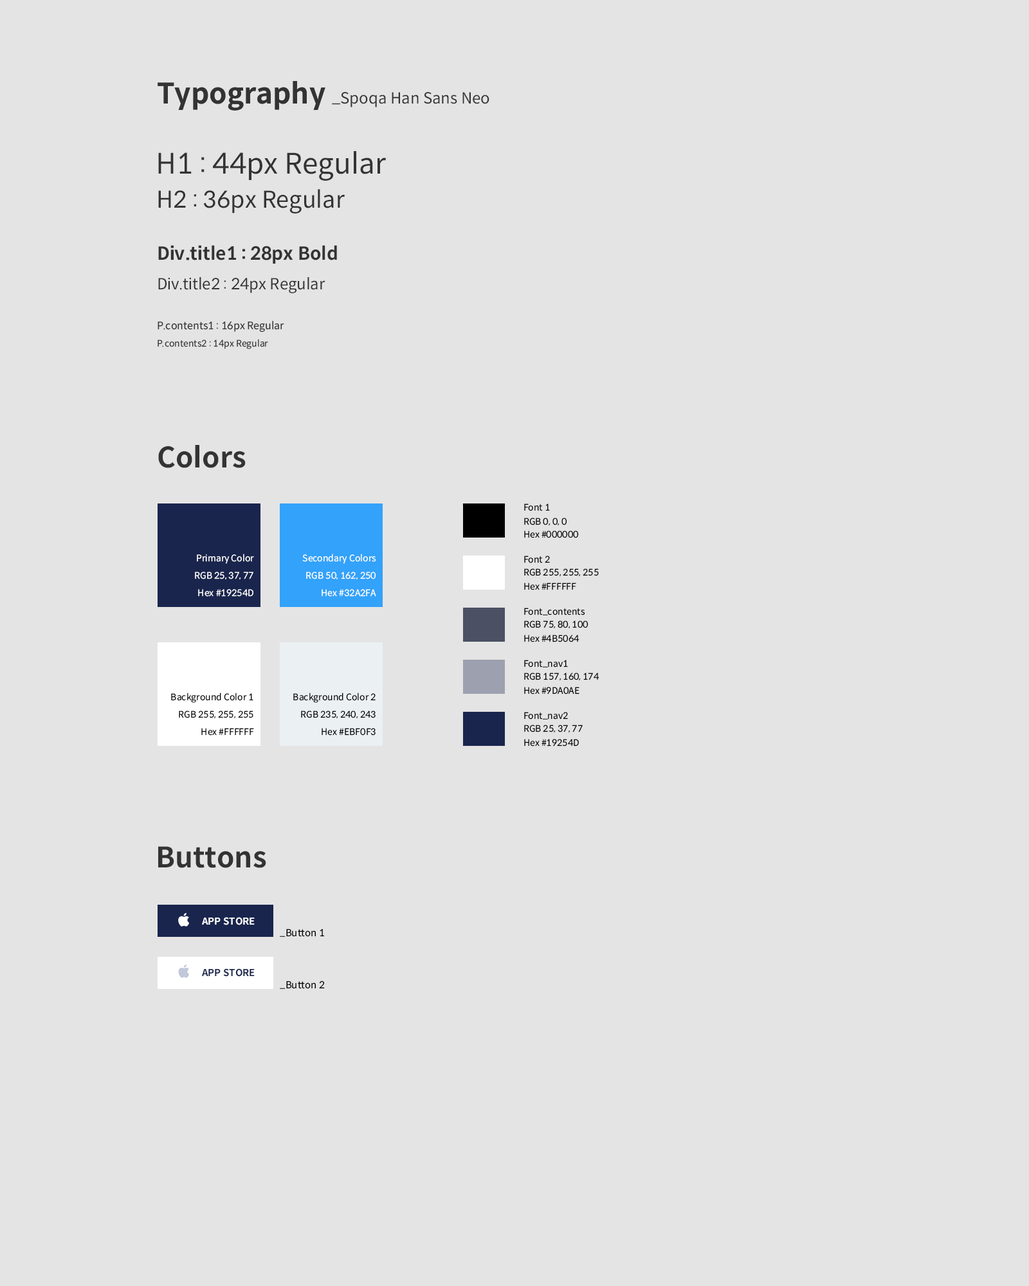
<style>
.page{position:relative;width:1029px;height:1286px;background:#e4e4e4}
.page>*{position:absolute;margin:0}
.t1{font:28.3px "SpoqaHanSansNeo-Bold";color:#333333}
.t2{font:15.4px "SpoqaHanSansNeo-Regular";color:#333333}
.t3{font:28.3px "SpoqaHanSansNeo-Regular";color:#333333}
.t4{font:23.1px "SpoqaHanSansNeo-Regular";color:#333333}
.t5{font:18px "SpoqaHanSansNeo-Bold";color:#333333}
.t6{font:10.3px "SpoqaHanSansNeo-Regular";color:#333333}
.t7{font:9px "SpoqaHanSansNeo-Regular";color:#333333}
.t8{font:9px "SpoqaHanSansNeo-Regular";color:#000000}
.t9{font:9px "SpoqaHanSansNeo-Regular";color:#ffffff}
.t10{font:9.6px "SpoqaHanSansNeo-Bold";color:#ffffff}
.t11{font:9.6px "SpoqaHanSansNeo-Regular";color:#000000}
.t12{font:9.6px "SpoqaHanSansNeo-Bold";color:#19254d}
</style>
<div class="page">
<p class="t1" style="left:158px;top:81px;width:167px;height:30px">Typography</p>
<p class="t1" style="left:158px;top:81px;width:167px;height:30px">Typography</p>
<p class="t2" style="left:332px;top:92px;width:157px;height:15px">_Spoqa Han Sans Neo</p>
<p class="t3" style="left:158px;top:151px;width:228px;height:30px">H1 : 44px Regular</p>
<p class="t4" style="left:158px;top:189px;width:187px;height:24px">H2 : 36px Regular</p>
<p class="t5" style="left:158px;top:245px;width:179px;height:19px">Div.title1 : 28px Bold</p>
<p class="t2" style="left:158px;top:277px;width:167px;height:16px">Div.title2 : 24px Regular</p>
<p class="t6" style="left:158px;top:321px;width:126px;height:11px">P.contents1 : 16px Regular</p>
<p class="t7" style="left:158px;top:339px;width:110px;height:10px">P.contents2 : 14px Regular</p>
<p class="t1" style="left:158px;top:445px;width:88px;height:23px">Colors</p>
<p class="t8" style="left:524px;top:503px;width:26px;height:8px">Font 1</p>
<p class="t8" style="left:524px;top:518px;width:43px;height:8px">RGB 0, 0, 0</p>
<p class="t8" style="left:524px;top:530px;width:55px;height:8px">Hex #000000</p>
<p class="t9" style="left:197px;top:554px;width:57px;height:10px">Primary Color</p>
<p class="t9" style="left:302px;top:554px;width:74px;height:10px">Secondary Colors</p>
<p class="t8" style="left:524px;top:555px;width:26px;height:8px">Font 2</p>
<p class="t8" style="left:524px;top:568px;width:74px;height:9px">RGB 255, 255, 255</p>
<p class="t9" style="left:195px;top:572px;width:58px;height:8px">RGB 25, 37, 77</p>
<p class="t9" style="left:306px;top:572px;width:70px;height:8px">RGB 50, 162, 250</p>
<p class="t9" style="left:198px;top:589px;width:55px;height:8px">Hex #19254D</p>
<p class="t9" style="left:321px;top:589px;width:55px;height:8px">Hex #32A2FA</p>
<p class="t8" style="left:524px;top:582px;width:52px;height:8px">Hex #FFFFFF</p>
<p class="t8" style="left:524px;top:608px;width:61px;height:7px">Font_contents</p>
<p class="t8" style="left:524px;top:620px;width:64px;height:9px">RGB 75, 80, 100</p>
<p class="t8" style="left:524px;top:634px;width:55px;height:8px">Hex #4B5064</p>
<p class="t8" style="left:524px;top:660px;width:44px;height:7px">Font_nav1</p>
<p class="t8" style="left:524px;top:672px;width:75px;height:9px">RGB 157, 160, 174</p>
<p class="t8" style="left:524px;top:687px;width:55px;height:7px">Hex #9DA0AE</p>
<p class="t8" style="left:171px;top:692px;width:82px;height:11px">Background Color 1</p>
<p class="t8" style="left:293px;top:692px;width:82px;height:11px">Background Color 2</p>
<p class="t8" style="left:179px;top:710px;width:74px;height:9px">RGB 255, 255, 255</p>
<p class="t8" style="left:301px;top:710px;width:74px;height:9px">RGB 235, 240, 243</p>
<p class="t8" style="left:524px;top:712px;width:44px;height:7px">Font_nav2</p>
<p class="t8" style="left:524px;top:724px;width:58px;height:9px">RGB 25, 37, 77</p>
<p class="t8" style="left:201px;top:728px;width:53px;height:7px">Hex #FFFFFF</p>
<p class="t8" style="left:321px;top:728px;width:54px;height:7px">Hex #EBF0F3</p>
<p class="t8" style="left:524px;top:739px;width:55px;height:7px">Hex #19254D</p>
<p class="t1" style="left:158px;top:846px;width:108px;height:22px">Buttons</p>
<p class="t10" style="left:202px;top:917px;width:53px;height:8px">APP STORE</p>
<p class="t11" style="left:280px;top:928px;width:44px;height:9px">_Button 1</p>
<p class="t12" style="left:202px;top:968px;width:53px;height:9px">APP STORE</p>
<p class="t11" style="left:280px;top:980px;width:45px;height:9px">_Button 2</p>
</div>
